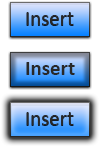
<style>
.page{position:relative;width:100px;height:146px}
.page>*{position:absolute;margin:0}
.t1{font:20.8px "Calibri";color:#282828}
.t2{font:20.8px "Calibri-Bold";color:#282828}
</style>
<div class="page">
<p class="t1" style="left:26px;top:12px;width:48px;height:13px">Insert</p>
<p class="t2" style="left:26px;top:62px;width:49px;height:13px">Insert</p>
<p class="t1" style="left:26px;top:112px;width:48px;height:13px">Insert</p>
</div>
